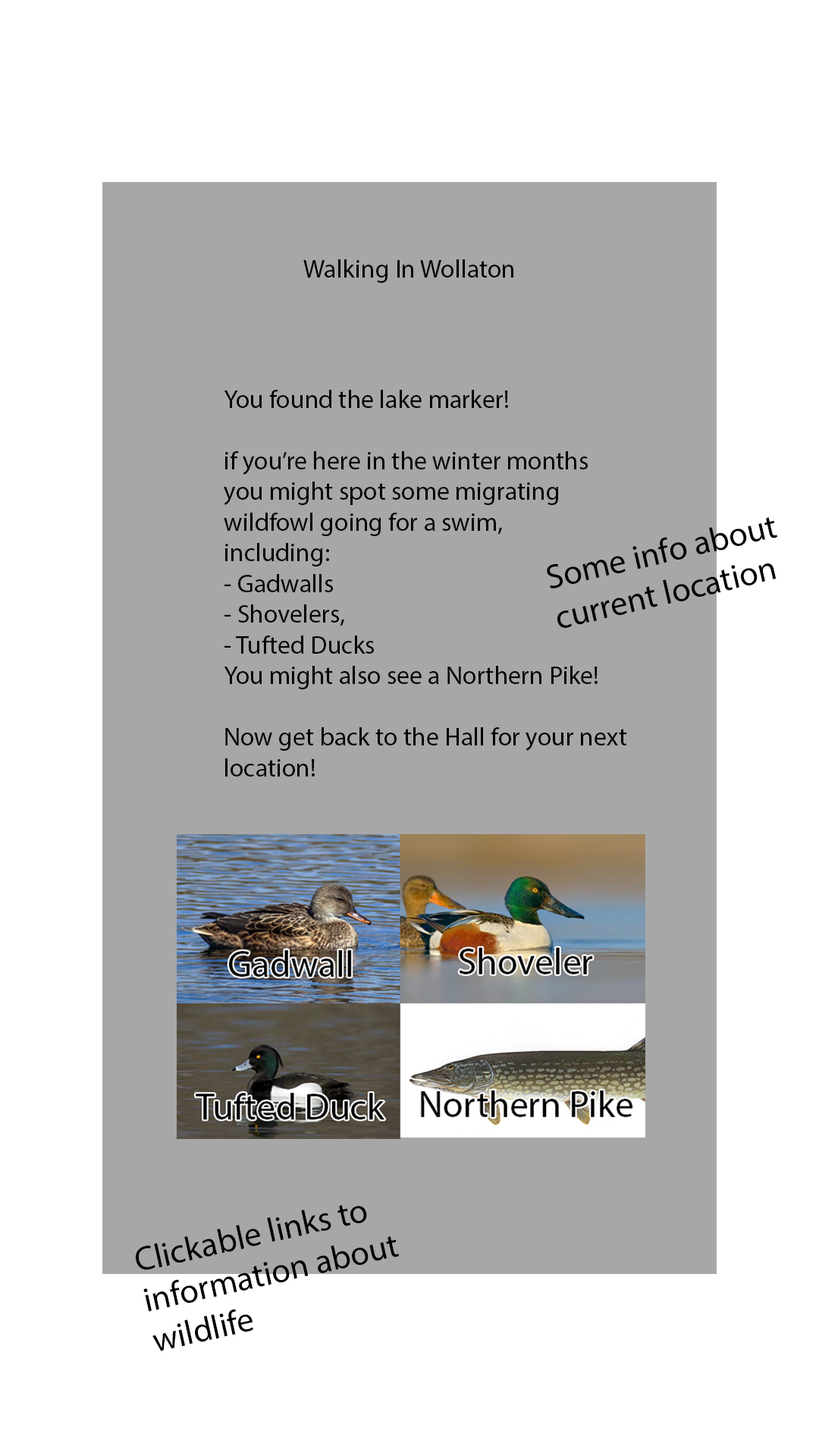
<style>
.page{position:relative;width:819px;height:1456px;background:#ffffff}
.page>*{position:absolute;margin:0}
.t1{font:25.6px "MyriadPro-Regular";color:#020202}
.t2{font:34.1px "MyriadPro-Regular";color:#020202}
</style>
<div class="page">
<p class="t1" style="left:303px;top:259px;width:210px;height:24px">Walking In Wollaton</p>
<p class="t1" style="left:224px;top:390px;width:403px;height:387px">You found the lake marker!<br><br>if you’re here in the winter months <br>you might spot some migrating <br>wildfowl going for a swim, <br>including: <br>- Gadwalls<br>- Shovelers,<br>- Tufted Ducks<br>You might also see a Northern Pike!<br><br>Now get back to the Hall for your next<br>location!</p>
<p class="t2" style="left:547px;top:516px;width:231px;height:112px;rotate:-13deg">Some info about <br>current location</p>
<p class="t2" style="left:135px;top:1205px;width:265px;height:146px;rotate:-13deg">Clickable links to <br>information about<br>wildlife</p>
</div>
